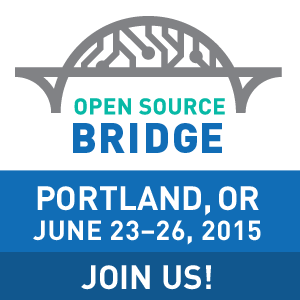
<style>
.page{position:relative;width:300px;height:300px;background:#ffffff}
.page>*{position:absolute;margin:0}
.t1{font:22.4px "DIN-Bold";letter-spacing:0.02em;color:#08b9a6}
.t2{font:41.6px "DIN-Black";letter-spacing:0.06em;color:#116db6}
.t3{font:41.6px "DIN-Black";letter-spacing:0.02em;color:#116db6}
.t4{font:41.6px "DIN-Black";letter-spacing:0.03em;color:#116db6}
.t5{font:27.2px/30.2px "DIN-Bold";letter-spacing:0.02em;color:#ffffff}
.t6{font:33.2px/30.2px "DIN-Bold";color:#ffffff}
.t7{font:33.2px "DIN-Bold";color:#ffffff}
</style>
<div class="page">
<p class="t1" style="left:74px;top:98px;width:151px;height:17px">OPEN SOURCE</p>
<p class="t2" style="left:73px;top:123px;width:149px;height:30px"><span class="t3">B</span>RI<span class="t4">D</span><span class="t3">GE</span></p>
<p class="t5" style="left:33px;top:186px;width:228px;height:59px;text-align:center"><span class="t6">PORTLAND, OR<br></span>JUNE 23–26, 2015</p>
<p class="t7" style="left:81px;top:265px;width:130px;height:25px">JOIN US!</p>
</div>
